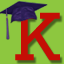
<style>
.page{position:relative;width:64px;height:64px;background:#8dc73f}
.page>*{position:absolute;margin:0}
.t1{font:72.1px "Archer-Semibold";letter-spacing:0.05em;color:#c40e05}
</style>
<div class="page">
<p class="t1" style="left:15px;top:12px;width:45px;height:49px">K</p>
</div>
